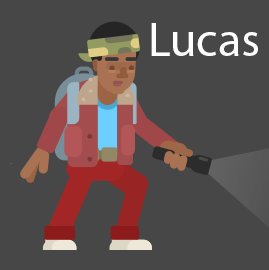
<style>
.page{position:relative;width:269px;height:270px;background:#474747}
.page>*{position:absolute;margin:0}
.t1{font:48px "MyriadPro-Regular";color:#ffffff}
</style>
<div class="page">
<p class="t1" style="left:151px;top:23px;width:107px;height:33px">Lucas</p>
</div>
